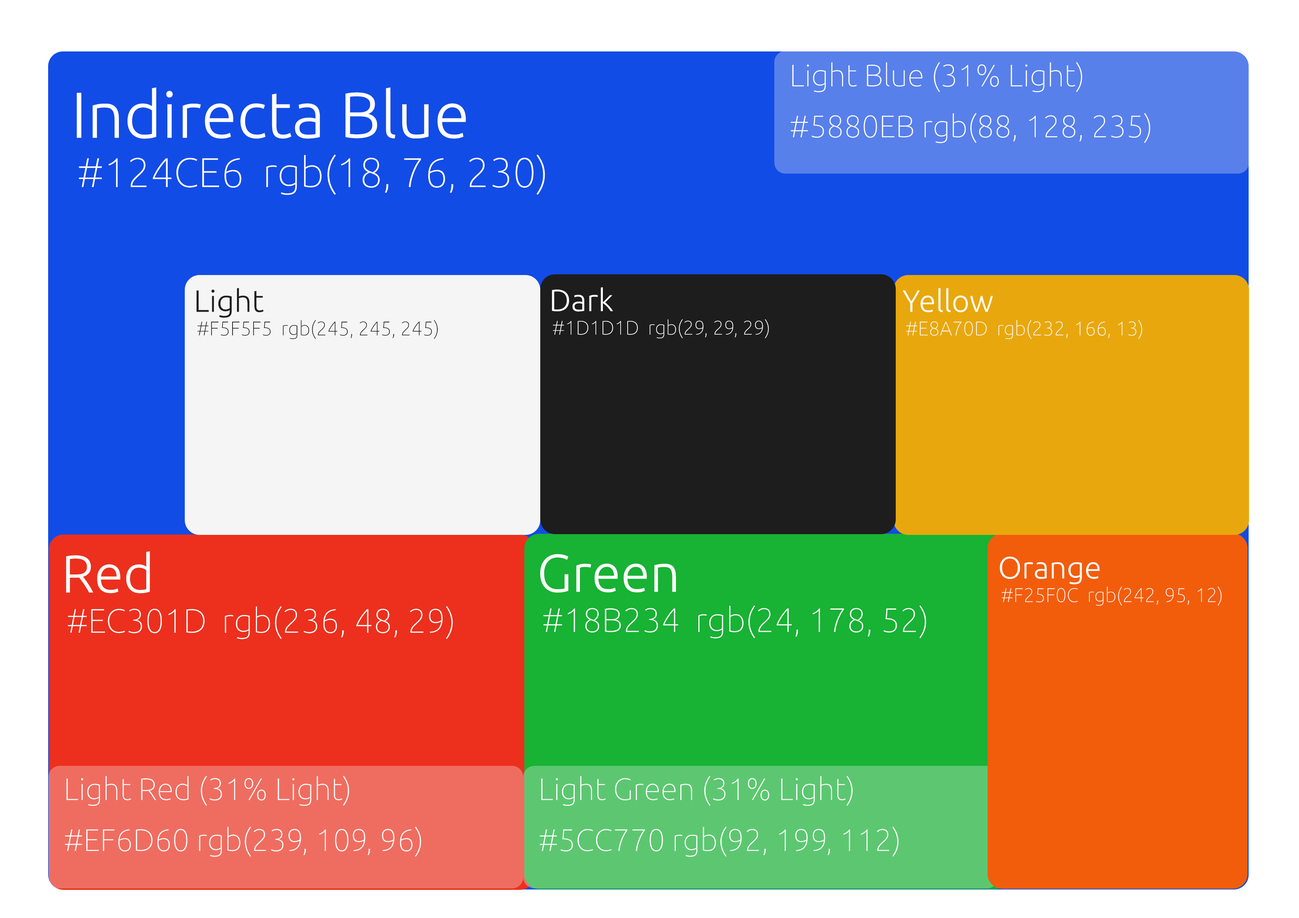
<style>
.page{position:relative;width:1299px;height:918px}
.page>*{position:absolute;margin:0}
.t1{font:31px/50.9px "Ubuntu-Thin";color:#ffffff}
.t2{font:64.8px "Ubuntu-Light";color:#ffffff}
.t3{font:41.4px "Ubuntu-Thin";color:#ffffff}
.t4{font:30.9px "Ubuntu-Light";color:#1d1d1d}
.t5{font:30.9px "Ubuntu-Light";color:#ffffff}
.t6{font:19.7px "Ubuntu-Thin";color:#1d1d1d}
.t7{font:19.7px "Ubuntu-Thin";color:#ffffff}
.t8{font:53px "Ubuntu-Light";color:#ffffff}
.t9{font:33.9px "Ubuntu-Thin";color:#ffffff}
</style>
<div class="page">
<p class="t1" style="left:790px;top:62px;width:360px;height:81px">Light Blue (31% Light)<br>#5880EB rgb(88, 128, 235)</p>
<p class="t2" style="left:77px;top:87px;width:389px;height:52px">Indirecta Blue</p>
<p class="t3" style="left:79px;top:154px;width:466px;height:41px">#124CE6  rgb(18, 76, 230)</p>
<p class="t4" style="left:196px;top:288px;width:68px;height:30px">Light</p>
<p class="t5" style="left:552px;top:287px;width:61px;height:25px">Dark</p>
<p class="t5" style="left:903px;top:288px;width:90px;height:24px">Yellow</p>
<p class="t6" style="left:197px;top:320px;width:241px;height:19px">#F5F5F5  rgb(245, 245, 245)</p>
<p class="t7" style="left:553px;top:319px;width:216px;height:19px">#1D1D1D  rgb(29, 29, 29)</p>
<p class="t7" style="left:906px;top:320px;width:236px;height:19px">#E8A70D  rgb(232, 166, 13)</p>
<p class="t8" style="left:66px;top:551px;width:84px;height:42px">Red</p>
<p class="t8" style="left:540px;top:554px;width:136px;height:39px">Green</p>
<p class="t5" style="left:1000px;top:556px;width:100px;height:29px">Orange</p>
<p class="t7" style="left:1001px;top:586px;width:220px;height:20px">#F25F0C  rgb(242, 95, 12)</p>
<p class="t9" style="left:543px;top:605px;width:383px;height:34px">#18B234  rgb(24, 178, 52)</p>
<p class="t9" style="left:68px;top:606px;width:385px;height:33px">#EC301D  rgb(236, 48, 29)</p>
<p class="t1" style="left:65px;top:776px;width:356px;height:81px">Light Red (31% Light)<br>#EF6D60 rgb(239, 109, 96)</p>
<p class="t1" style="left:539px;top:776px;width:360px;height:81px">Light Green (31% Light)<br>#5CC770 rgb(92, 199, 112)</p>
</div>
